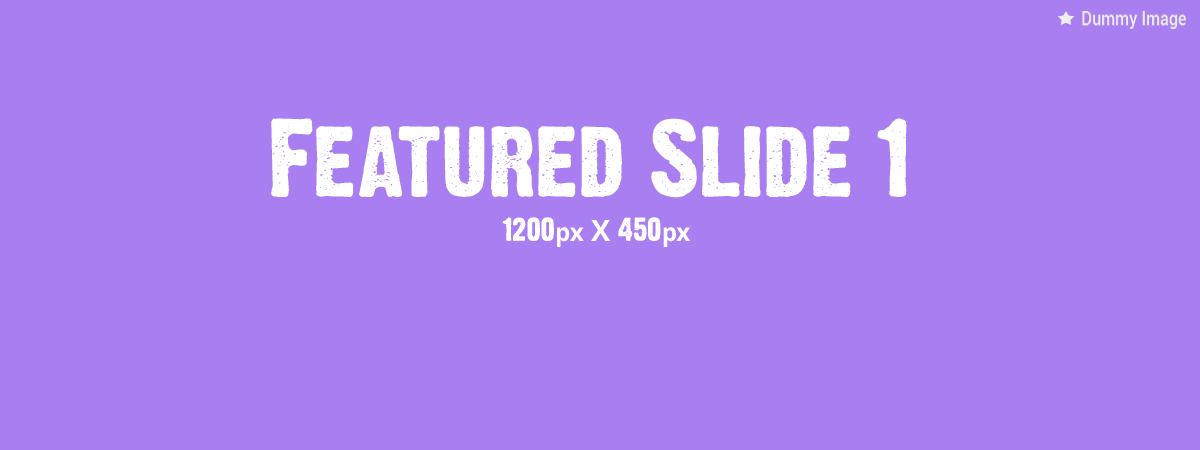
<style>
.page{position:relative;width:1200px;height:450px;background:#a97ef0}
.page>*{position:absolute;margin:0}
.t1{font:16.4px "Roboto-Medium";color:#eeeeee}
.t2{font:98.2px "DirtyHeadline";color:#ffffff}
.t3{font:29.5px "DirtyHeadline";color:#ffffff}
.t4{font:24.5px "OpenSans-Bold";color:#ffffff}
.t5{font:29.5px "OpenSans-Bold";color:#ffffff}
</style>
<div class="page">
<p class="t1" style="left:1082px;top:11px;width:104px;height:18px">Dummy Image</p>
<p class="t2" style="left:271px;top:118px;width:636px;height:80px">Featured Slide 1</p>
<p class="t3" style="left:502px;top:217px;width:188px;height:30px">1200<span class="t4">px</span><span class="t5"> X </span>450<span class="t4">px</span></p>
</div>
